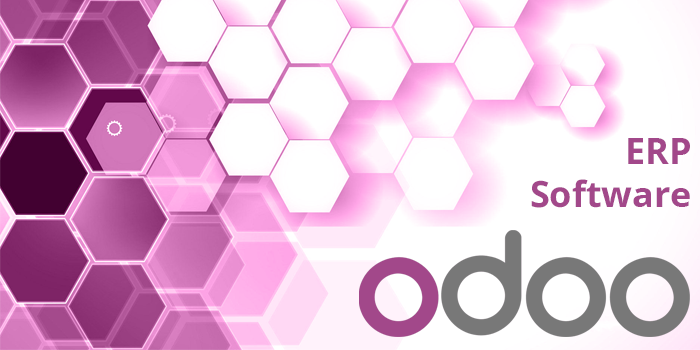
<style>
.page{position:relative;width:700px;height:350px;background:#ffffff}
.page>*{position:absolute;margin:0}
.t1{font:36px "OpenSans-Bold";color:#a2488a}
</style>
<div class="page">
<p class="t1" style="left:531px;top:138px;width:159px;height:70px;text-align:right">ERP<br>Software</p>
</div>
